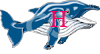
<style>
.page{position:relative;width:100px;height:54px;background:#ffffff}
.page>*{position:absolute;margin:0}
.t1{font:24px "TimesNewRomanPSMT";color:#ff0060}
</style>
<div class="page">
<p class="t1" style="left:50px;top:11px;width:17px;height:16px">H</p>
</div>
